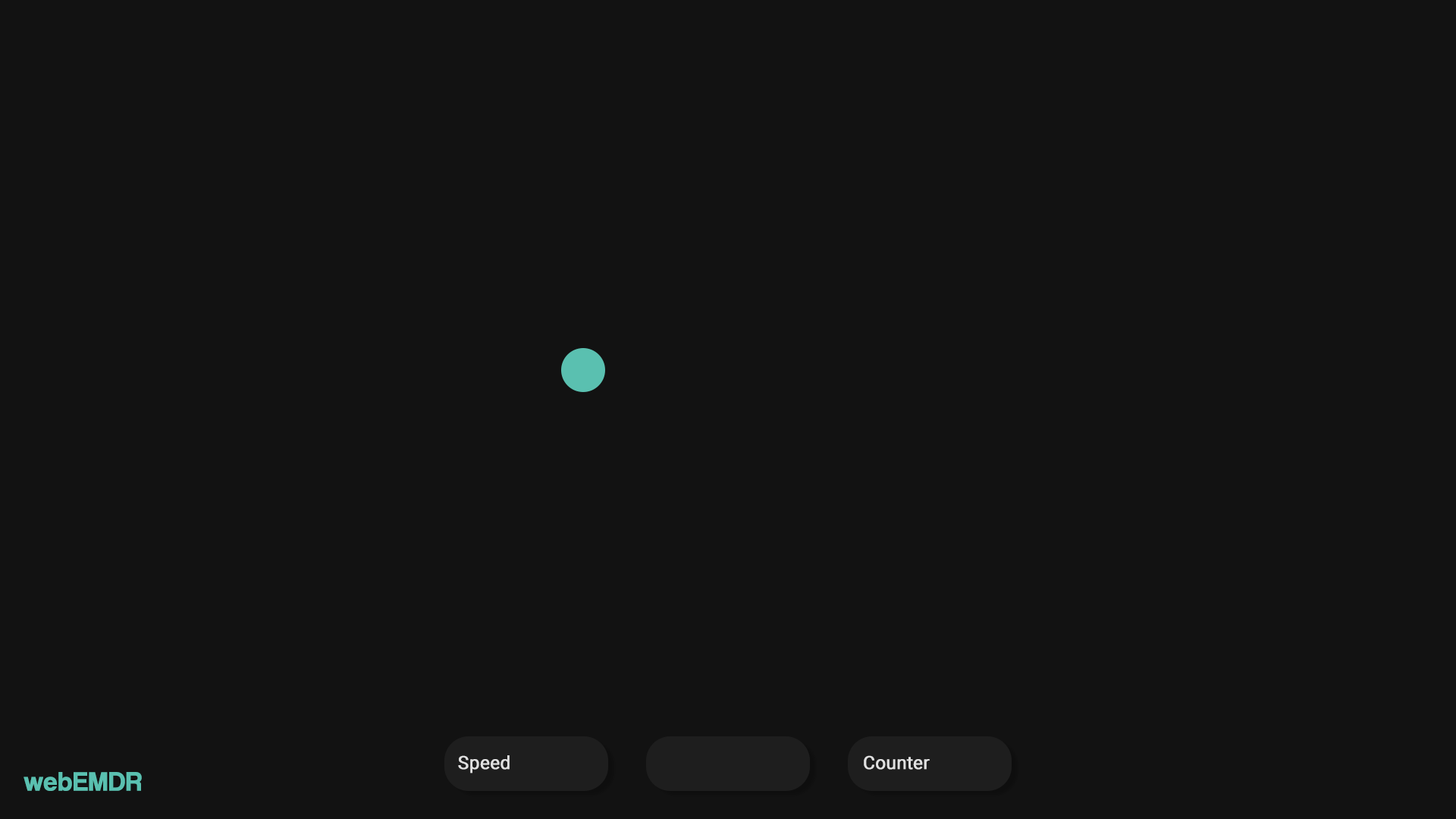
<style>
.page{position:relative;width:1456px;height:819px;background:#121212}
.page>*{position:absolute;margin:0}
.t1{font:18.2px "Roboto-Regular";color:#e1e1e1;font-weight:bold}
.t2{font:27.3px "CoolveticaRg-Regular";color:#5ac0b0;font-weight:bold}
</style>
<div class="page">
<p class="t1" style="left:458px;top:755px;width:52px;height:18px">Speed</p>
<p class="t1" style="left:864px;top:755px;width:66px;height:15px">Counter</p>
<p class="t2" style="left:24px;top:772px;width:118px;height:19px">webEMDR</p>
</div>
